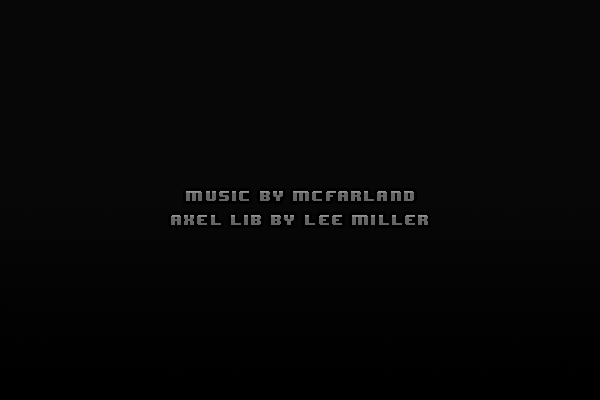
<style>
.page{position:relative;width:600px;height:400px;background:#080707}
.page>*{position:absolute;margin:0}
.t1{font:12.4px "8BITWONDERNominal";letter-spacing:0.1em;color:#656565}
</style>
<div class="page">
<p class="t1" style="left:186px;top:191px;width:228px;height:10px">MUSIC BY MCFarland</p>
<p class="t1" style="left:171px;top:215px;width:257px;height:10px">AXEL LIB by LEE MILLER</p>
</div>
